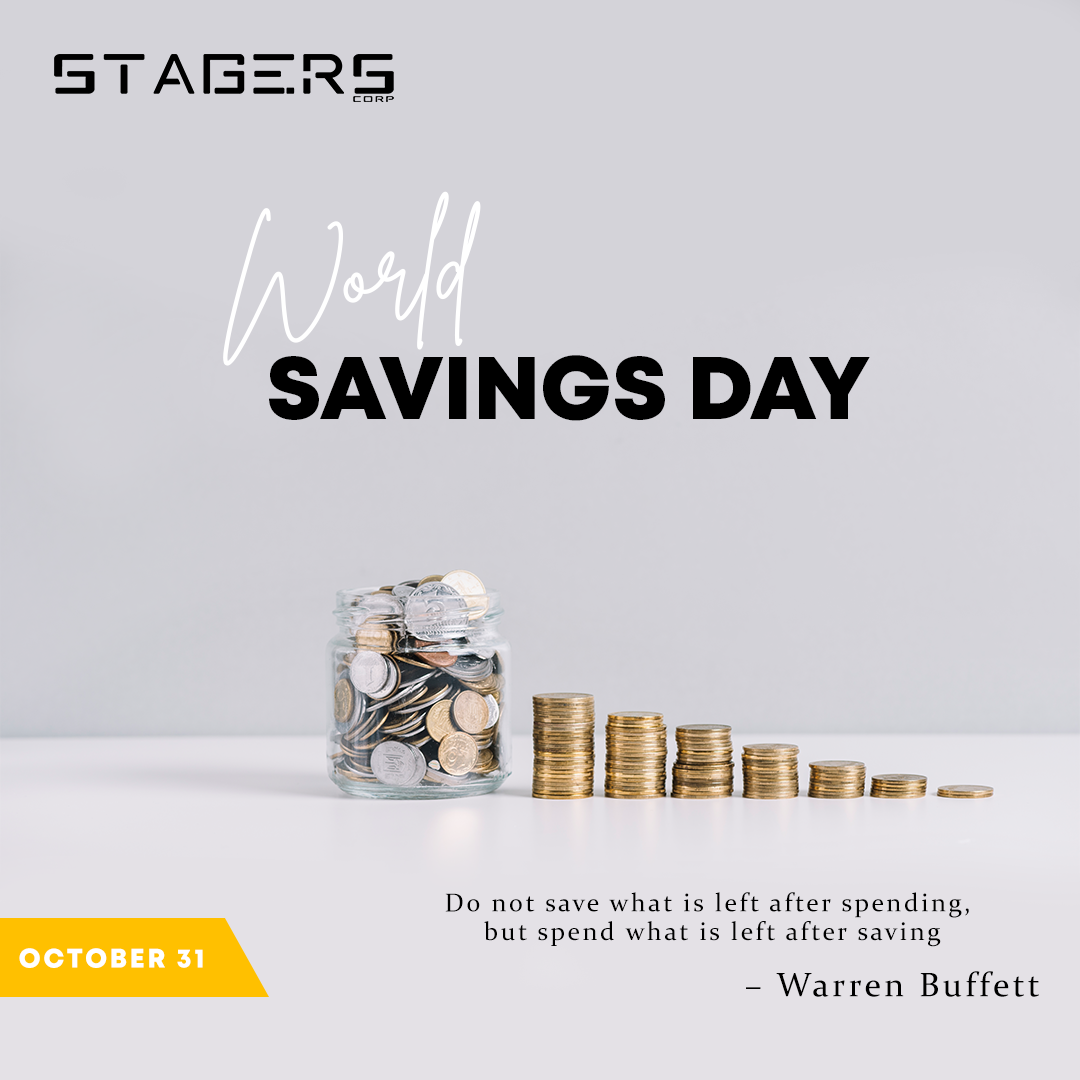
<style>
.page{position:relative;width:1080px;height:1080px;background:#d4d3d9}
.page>*{position:absolute;margin:0}
.t1{font:109.8px "BrittanySignatureRegular";color:#ffffff}
.t2{font:89px "Mont-HeavyDEMO";color:#000000}
.t3{font:25.8px/28.6px "Constantia";letter-spacing:0.1em;color:#000000}
.t4{font:26.6px "Mont-HeavyDEMO";letter-spacing:0.1em;color:#ffffff;text-transform:uppercase}
.t5{font:34px "Constantia";letter-spacing:0.1em;color:#000000}
</style>
<div class="page">
<p class="t1" style="left:223px;top:191px;width:258px;height:175px;rotate:-5deg">World</p>
<p class="t2" style="left:269px;top:355px;width:601px;height:66px">SAVINGS DAY</p>
<p class="t3" style="left:445px;top:892px;width:524px;height:55px;text-align:center">Do not save what is left after spending,<br> but spend what is left after saving</p>
<p class="t4" style="left:19px;top:948px;width:184px;height:20px">OCTober 31</p>
<p class="t5" style="left:746px;top:971px;width:293px;height:26px">– Warren Buffett</p>
</div>
